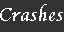
<style>
.page{position:relative;width:64px;height:32px;background:#333333}
.page>*{position:absolute;margin:0}
.t1{font:19.9px "Apple-Chancery";color:#ffffff}
</style>
<div class="page">
<p class="t1" style="left:0px;top:4px;width:63px;height:17px">Crashes</p>
</div>
